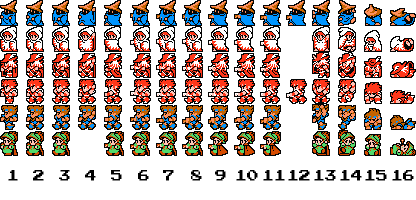
<style>
.page{position:relative;width:416px;height:200px;background:#ffffff}
.page>*{position:absolute;margin:0}
.t1{font:12px "PressStart2P";color:#000000}
</style>
<div class="page">
<p class="t1" style="left:8px;top:170px;width:10px;height:11px">1</p>
<p class="t1" style="left:33px;top:170px;width:11px;height:11px">2</p>
<p class="t1" style="left:59px;top:170px;width:11px;height:11px">3</p>
<p class="t1" style="left:85px;top:170px;width:11px;height:11px">4</p>
<p class="t1" style="left:111px;top:170px;width:11px;height:11px">5</p>
<p class="t1" style="left:138px;top:170px;width:11px;height:11px">6</p>
<p class="t1" style="left:163px;top:170px;width:11px;height:11px">7</p>
<p class="t1" style="left:191px;top:170px;width:11px;height:11px">8</p>
<p class="t1" style="left:215px;top:170px;width:11px;height:11px">9</p>
<p class="t1" style="left:236px;top:170px;width:22px;height:11px">10</p>
<p class="t1" style="left:263px;top:170px;width:22px;height:11px">11</p>
<p class="t1" style="left:288px;top:170px;width:22px;height:11px">12</p>
<p class="t1" style="left:314px;top:170px;width:22px;height:11px">13</p>
<p class="t1" style="left:340px;top:170px;width:22px;height:11px">14</p>
<p class="t1" style="left:365px;top:170px;width:22px;height:11px">15</p>
<p class="t1" style="left:392px;top:170px;width:22px;height:11px">16</p>
</div>
